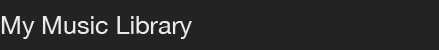
<style>
.page{position:relative;width:439px;height:50px;background:#232323}
.page>*{position:absolute;margin:0}
.t1{font:25px "HelveticaNeue";color:#eaeaea}
</style>
<div class="page">
<p class="t1" style="left:1px;top:16px;width:191px;height:23px">My Music Library</p>
</div>
